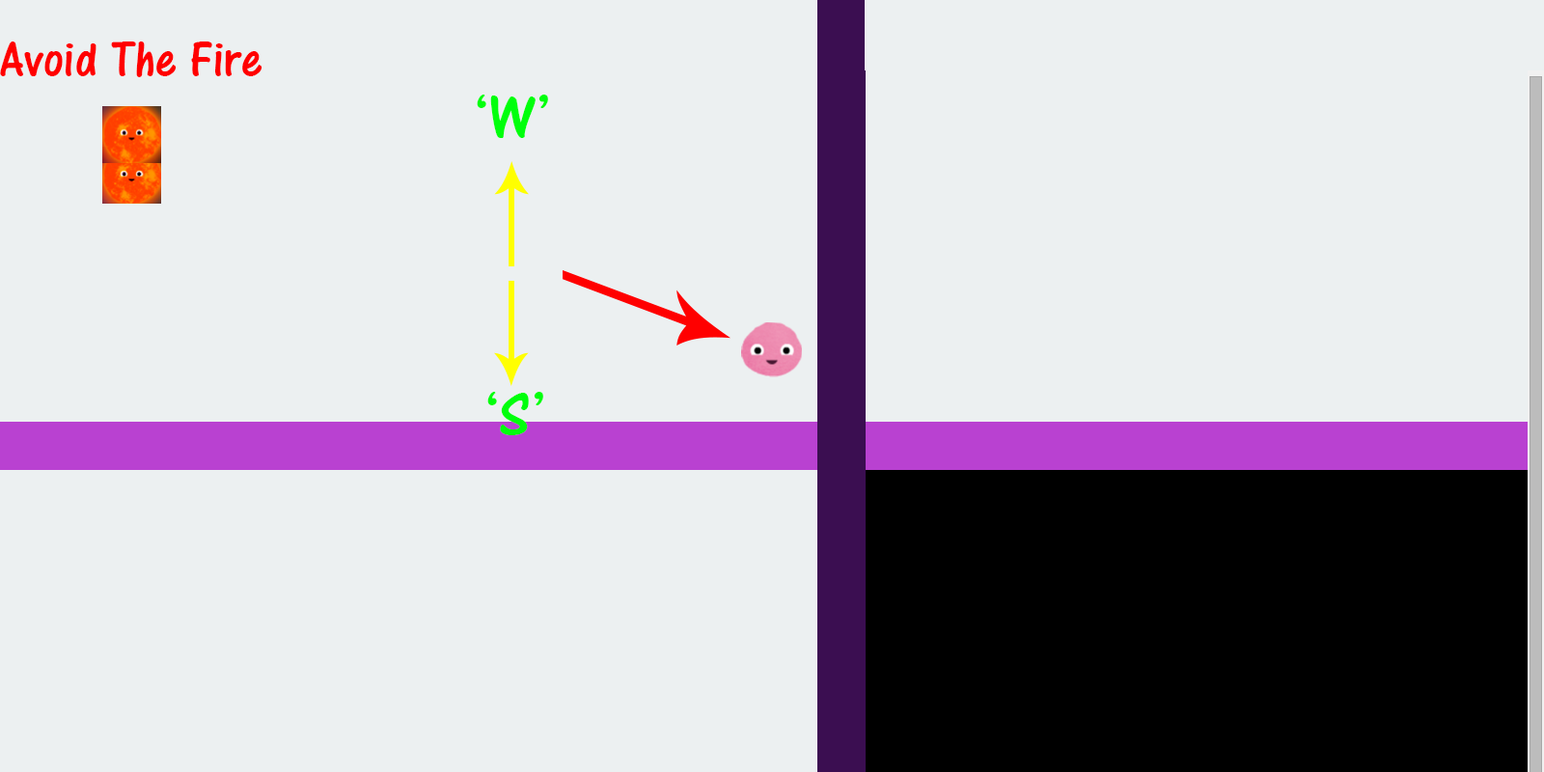
<style>
.page{position:relative;width:1544px;height:772px;background:#ecf0f1}
.page>*{position:absolute;margin:0}
.t1{font:52.1px "ARCENA";color:#ff0000}
.t2{font:64.3px "ARCENA";color:#00ff0c}
</style>
<div class="page">
<p class="t1" style="left:0px;top:42px;width:263px;height:35px">Avoid The Fire</p>
<p class="t2" style="left:477px;top:95px;width:71px;height:43px">‘W’</p>
<p class="t2" style="left:487px;top:392px;width:56px;height:43px">‘S’</p>
</div>
